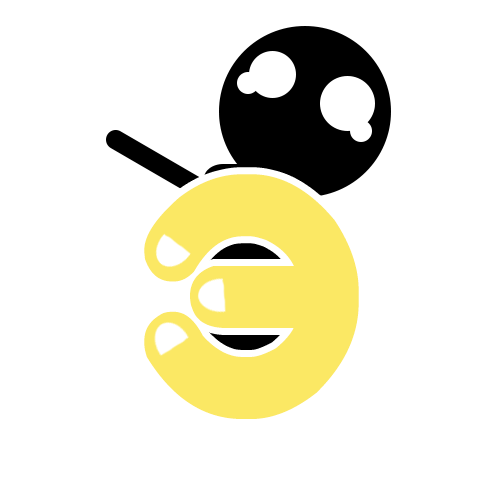
<style>
.page{position:relative;width:500px;height:500px;background:#ffffff}
.page>*{position:absolute;margin:0}
.t1{font:372.7px "smileyturtle";color:#fbe864;scale:0.92 1}
</style>
<div class="page">
<p class="t1" style="left:144px;top:174px;width:215px;height:245px;rotate:180deg">E</p>
</div>
